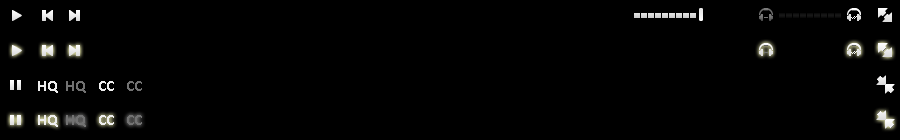
<style>
.page{position:relative;width:900px;height:140px;background:#000000}
.page>*{position:absolute;margin:0}
.t1{font:16px "Calibri-Bold";color:#eeeeee}
.t2{font:16px "Calibri-Bold";color:#727272}
</style>
<div class="page">
<p class="t1" style="left:38px;top:81px;width:20px;height:12px">HQ</p>
<p class="t2" style="left:66px;top:81px;width:20px;height:12px">HQ</p>
<p class="t1" style="left:99px;top:81px;width:15px;height:10px">CC</p>
<p class="t2" style="left:127px;top:81px;width:15px;height:10px">CC</p>
<p class="t1" style="left:38px;top:115px;width:20px;height:12px">HQ</p>
<p class="t2" style="left:66px;top:115px;width:20px;height:12px">HQ</p>
<p class="t1" style="left:99px;top:115px;width:15px;height:10px">CC</p>
<p class="t2" style="left:127px;top:115px;width:15px;height:10px">CC</p>
</div>
